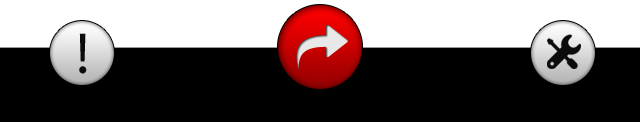
<style>
.page{position:relative;width:640px;height:122px;background:#000000}
.page>*{position:absolute;margin:0}
.t1{font:58.4px "MyriadPro-Regular";color:#000000}
</style>
<div class="page">
<p class="t1" style="left:79px;top:33px;width:8px;height:41px">!</p>
</div>
